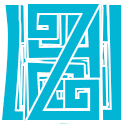
<style>
.page{position:relative;width:128px;height:128px;background:#03b5d5}
.page>*{position:absolute;margin:0}
.t1{font:144px "Ambages";color:#03b5d5}
</style>
<div class="page">
<p class="t1" style="left:26px;top:5px;width:75px;height:116px">Y</p>
<p class="t1" style="left:27px;top:4px;width:73px;height:116px">Z</p>
</div>
